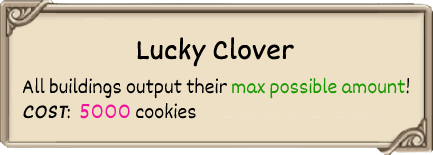
<style>
.page{position:relative;width:433px;height:155px;background:#ede0c4}
.page>*{position:absolute;margin:0}
.t1{font:30px "Dekko";color:#000000;font-weight:bold}
.t2{font:21px "Dekko";color:#000000}
.t3{font:21px "Dekko";color:#1b9902}
.t4{font:21px "Dekko";color:#000000;font-weight:bold;font-style:italic}
.t5{font:21px "Dekko";color:#f0129a}
</style>
<div class="page">
<p class="t1" style="left:137px;top:37px;width:157px;height:30px">Lucky Clover</p>
<p class="t2" style="left:22px;top:77px;width:388px;height:42px">All buildings output their <span class="t3">max possible amount</span>!<br><span class="t4">COST</span>:  <span class="t5">5000 </span>cookies</p>
</div>
